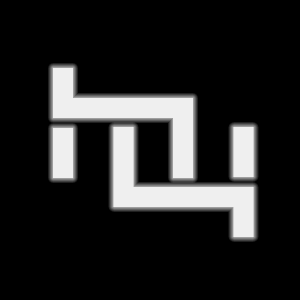
<style>
.page{position:relative;width:300px;height:300px;background:#000000}
.page>*{position:absolute;margin:0}
.t1{font:200px "Depthcorepublic";color:#efefef}
</style>
<div class="page">
<p class="t1" style="left:53px;top:68px;width:140px;height:110px">h</p>
<p class="t1" style="left:113px;top:127px;width:141px;height:110px;rotate:180deg">h</p>
</div>
